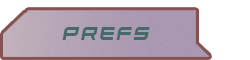
<style>
.page{position:relative;width:250px;height:60px;background:#ffffff}
.page>*{position:absolute;margin:0}
.t1{font:18px "UnitedKingdom";letter-spacing:0.13em;color:#466a6a;font-style:italic}
</style>
<div class="page">
<p class="t1" style="left:62px;top:27px;width:88px;height:13px">Prefs</p>
</div>
